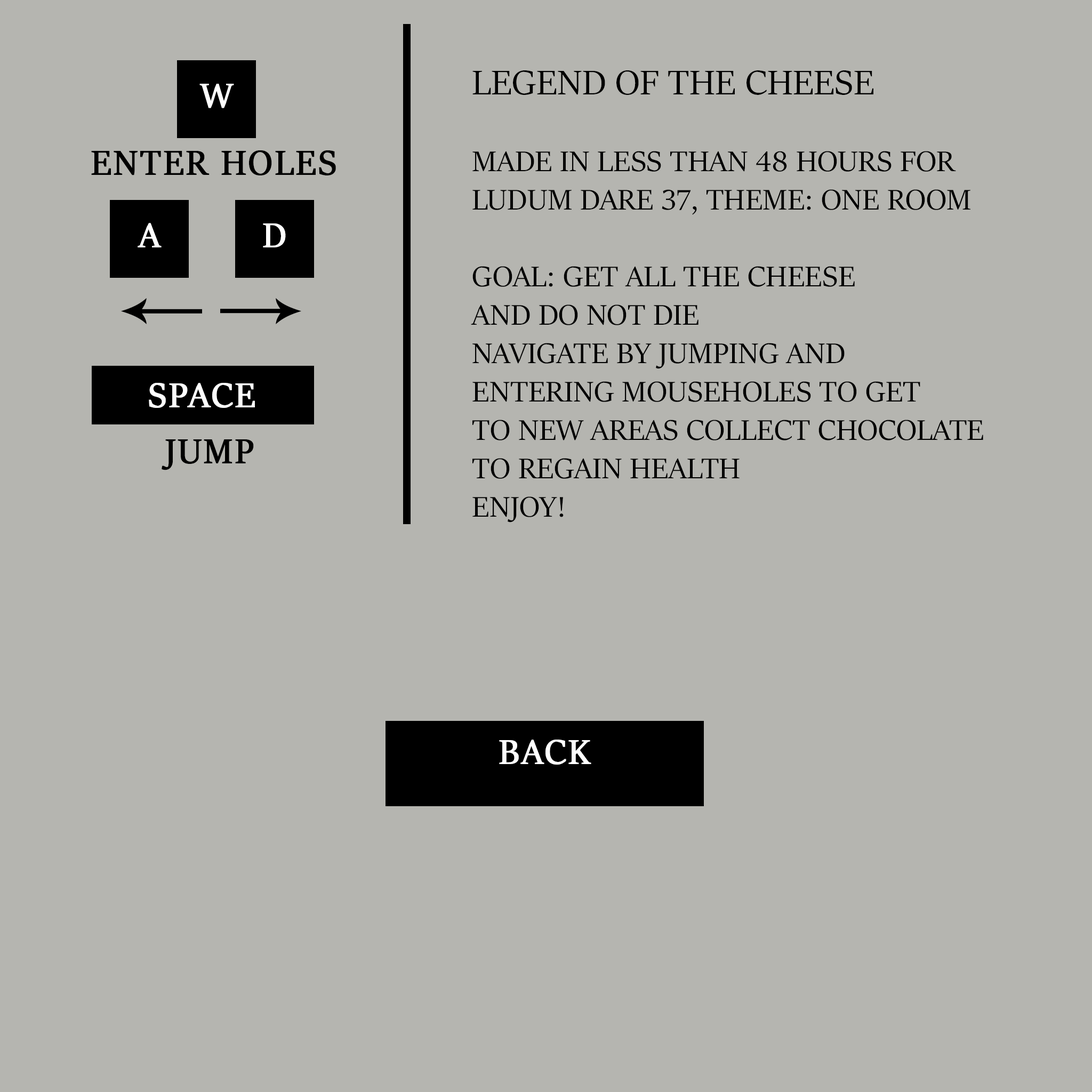
<style>
.page{position:relative;width:1092px;height:1092px;background:#b5b5b0}
.page>*{position:absolute;margin:0}
.t1{font:32px/38.4px "SitkaBanner";letter-spacing:0.005em;color:#000000;text-transform:uppercase}
.t2{font:38.4px/38.4px "SitkaBanner";letter-spacing:0.005em;color:#000000;text-transform:uppercase}
.t3{font:38.4px "SitkaBanner";letter-spacing:0.04em;color:#ffffff;text-transform:uppercase;font-weight:bold}
.t4{font:38.4px "SitkaBanner";letter-spacing:0.04em;color:#000000;text-transform:uppercase;font-weight:bold}
</style>
<div class="page">
<p class="t1" style="left:471px;top:70px;width:512px;height:453px"><span class="t2">Legend of the cheese<br><br></span>made in less than 48 hours for<br>ludum dare 37, theme: one room<br><br>goal: get all the cheese<br>and do not die<br>Navigate by jumping and<br>entering mouseholes to get<br>to new areas collect chocolate<br>to regain health<br>enjoy!</p>
<p class="t3" style="left:199px;top:84px;width:35px;height:24px">w</p>
<p class="t4" style="left:91px;top:150px;width:245px;height:25px">Enter holes</p>
<p class="t3" style="left:138px;top:223px;width:24px;height:24px">A</p>
<p class="t3" style="left:263px;top:223px;width:23px;height:24px">d</p>
<p class="t3" style="left:149px;top:383px;width:106px;height:25px">Space</p>
<p class="t4" style="left:162px;top:439px;width:92px;height:31px">Jump</p>
<p class="t3" style="left:499px;top:740px;width:92px;height:25px">Back</p>
</div>
